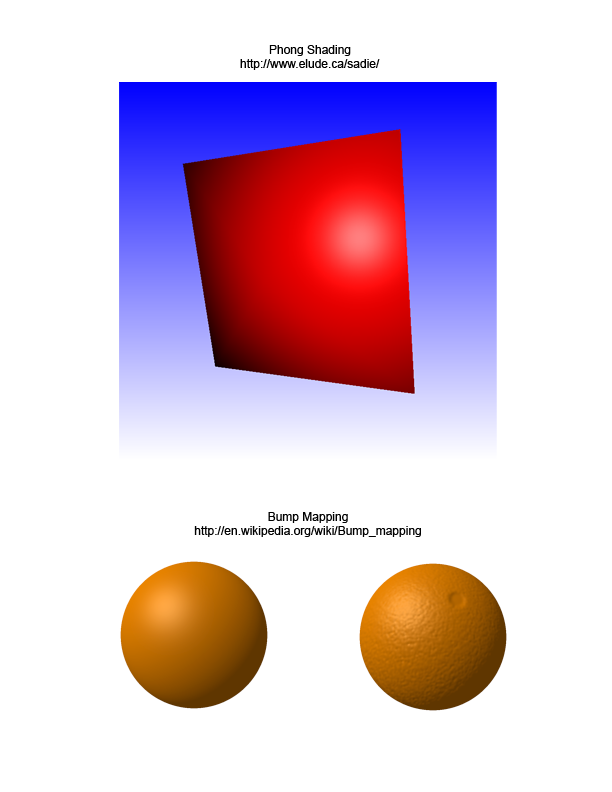
<style>
.page{position:relative;width:612px;height:792px;background:#ffffff}
.page>*{position:absolute;margin:0}
.t1{font:12px "ArialMT";color:#000000}
</style>
<div class="page">
<p class="t1" style="left:240px;top:45px;width:140px;height:25px;text-align:center">Phong Shading<br>http://www.elude.ca/sadie/</p>
<p class="t1" style="left:194px;top:512px;width:227px;height:25px;text-align:center">Bump Mapping<br>http://en.wikipedia.org/wiki/Bump_mapping</p>
</div>
